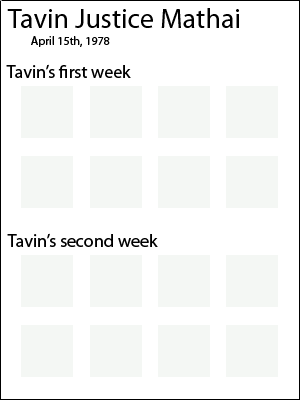
<style>
.page{position:relative;width:300px;height:400px;background:#ffffff}
.page>*{position:absolute;margin:0}
.t1{font:28px "MyriadPro-Regular";color:#000000}
.t2{font:12px "MyriadPro-Regular";color:#000000}
.t3{font:18px "MyriadPro-Regular";color:#000000}
</style>
<div class="page">
<p class="t1" style="left:7px;top:8px;width:232px;height:20px">Tavin Justice Mathai</p>
<p class="t2" style="left:31px;top:36px;width:79px;height:11px">April 15th, 1978</p>
<p class="t3" style="left:6px;top:64px;width:125px;height:14px">Tavin’s first week</p>
<p class="t3" style="left:7px;top:233px;width:151px;height:14px">Tavin’s second week</p>
</div>
